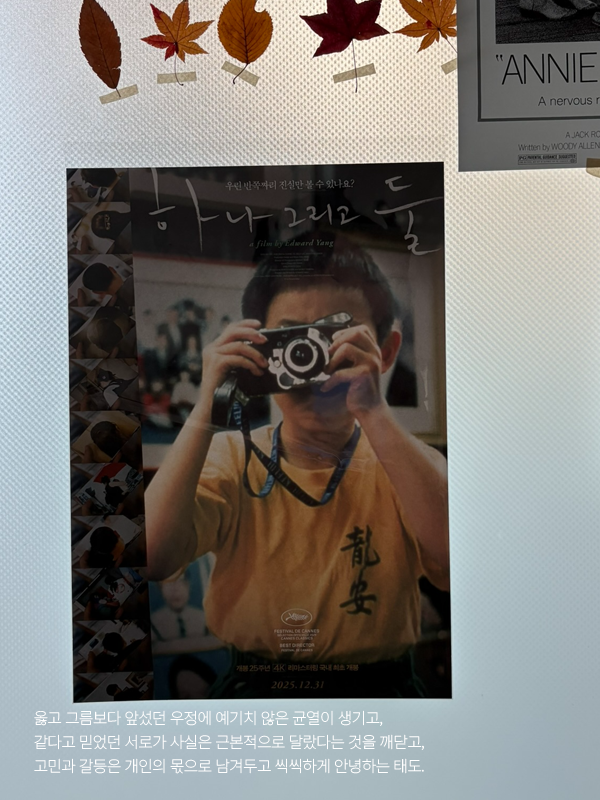
<style>
.page{position:relative;width:600px;height:800px}
.page>*{position:absolute;margin:0}
.t1{font:16px/24px "NotoSansKR-Thin";letter-spacing:-0.05em;color:#ffffff}
</style>
<div class="page">
<p class="t1" style="left:34px;top:710px;width:390px;height:64px">옳고 그름보다 앞섰던 우정에 예기치 않은 균열이 생기고, <br>같다고 믿었던 서로가 사실은 근본적으로 달랐다는 것을 깨닫고, <br>고민과 갈등은 개인의 몫으로 남겨두고 씩씩하게 안녕하는 태도.</p>
</div>
